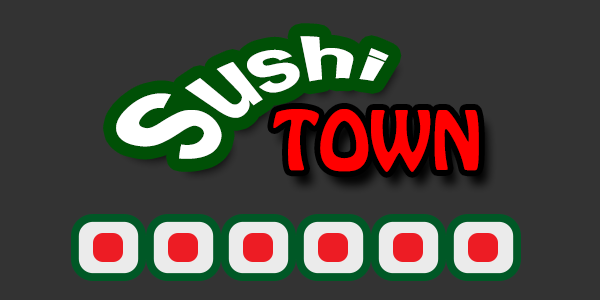
<style>
.page{position:relative;width:600px;height:300px;background:#333333}
.page>*{position:absolute;margin:0}
.t1{font:72px "FranklinGothic-Demi";color:#ffffff}
.t2{font:72px "HoboStd";color:#ff0000}
</style>
<div class="page">
<p class="t1" style="left:116px;top:36px;width:273px;height:123px;rotate:-21deg">Sushi</p>
<p class="t2" style="left:273px;top:109px;width:206px;height:63px">TOWN</p>
</div>
